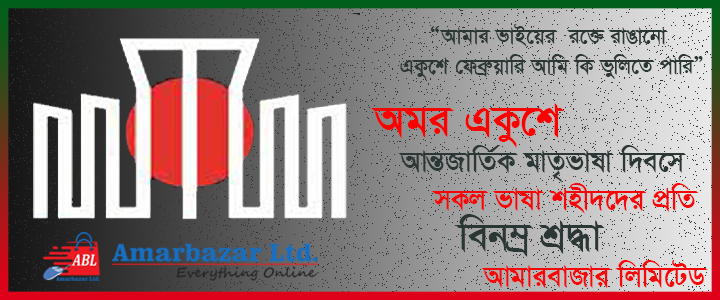
<style>
.page{position:relative;width:720px;height:300px}
.page>*{position:absolute;margin:0}
.t1{font:25px "SutonnyMJBold";color:#2a3735}
.t2{font:50px "SutonnyMJBold";color:#f90202}
.t3{font:33.3px "SutonnyMJBold";color:#2a3735}
.t4{font:33.3px "SutonnyMJBold";color:#f60606}
.t5{font:45.8px "SutonnyMJBold";color:#2a3735}
.t6{font:33.3px "SutonnyMJBold";color:#f60808}
</style>
<div class="page">
<p class="t1" style="left:400px;top:24px;width:303px;height:56px;text-align:center">ÒAvgvi fvB‡qi  i‡³ ivOv‡bv <br>GKz‡k †deªæqvwi Avwg wK fywj‡Z cvwiÓ</p>
<p class="t2" style="left:371px;top:103px;width:194px;height:45px">Agi GKz‡k</p>
<p class="t3" style="left:398px;top:145px;width:289px;height:38px">AvšÍRvwZ©K gvZ…fvlv w`e‡m</p>
<p class="t4" style="left:431px;top:183px;width:268px;height:31px">mKj fvlv knx`‡`i cÖwZ</p>
<p class="t5" style="left:455px;top:214px;width:150px;height:43px">web¤ª kÖ×v</p>
<p class="t6" style="left:481px;top:260px;width:227px;height:28px">AvgvievRvi wjwg‡UW</p>
</div>
